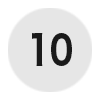
<style>
.page{position:relative;width:100px;height:100px;background:#e6e6e6}
.page>*{position:absolute;margin:0}
.t1{font:39.4px "HiraKakuStd-W7";color:#1a1a1a;scale:0.79 1}
</style>
<div class="page">
<p class="t1" style="left:32px;top:33px;width:40px;height:33px">10</p>
</div>
